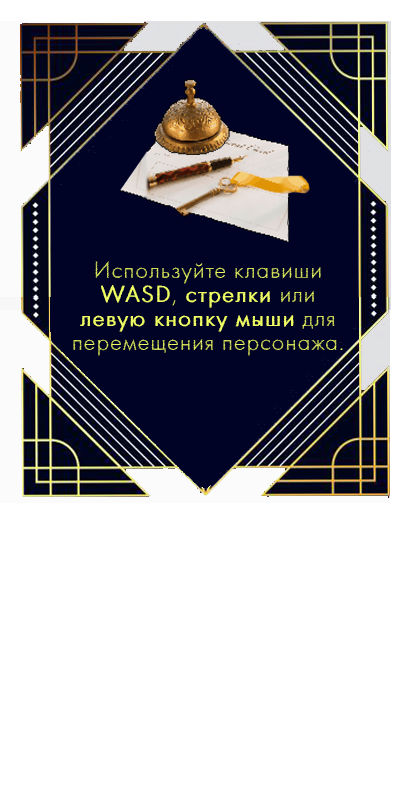
<style>
.page{position:relative;width:400px;height:800px;background:#ffffff}
.page>*{position:absolute;margin:0}
.t1{font:24px/24px "SchistLight";letter-spacing:0.05em;color:#effc63}
.t2{font:24px/24px "SchistLight";letter-spacing:0.05em;color:#effc63;font-weight:bold}
</style>
<div class="page">
<p class="t1" style="left:73px;top:261px;width:270px;height:95px;text-align:center">Используйте клавиши <span class="t2">WASD</span>, <span class="t2">стрелки </span>или <br><span class="t2">левую кнопку мыши</span> для перемещения персонажа.</p>
</div>
